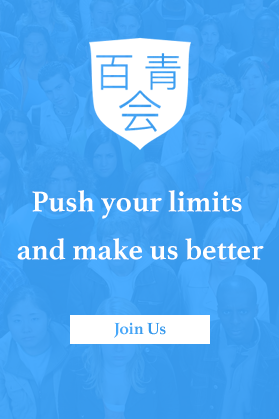
<style>
.page{position:relative;width:279px;height:419px}
.page>*{position:absolute;margin:0}
.t1{font:30px/48px "Athelas-Bold";color:#ffffff}
</style>
<div class="page">
<p class="t1" style="left:17px;top:190px;width:247px;height:70px;text-align:center">Push your limits <br>and make us better</p>
</div>
